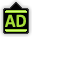
<style>
.page{position:relative;width:64px;height:64px;background:#ffffff}
.page>*{position:absolute;margin:0}
.t1{font:19px "Calibri-Bold";color:#a6dd37;text-transform:uppercase;scale:0.92 1}
</style>
<div class="page">
<p class="t1" style="left:5px;top:14px;width:21px;height:13px">AD</p>
</div>
